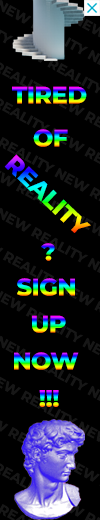
<style>
.page{position:relative;width:100px;height:520px;background:#000000}
.page>*{position:absolute;margin:0}
.t1{font:24px "MontserratRoman-ExtraBold";letter-spacing:-0.02em;text-transform:uppercase}
</style>
<div class="page">
<p class="t1" style="left:12px;top:86px;width:75px;height:18px">tired</p>
<p class="t1" style="left:33px;top:129px;width:35px;height:18px">of</p>
<p class="t1" style="left:4px;top:154px;width:87px;height:79px;rotate:44deg">reality</p>
<p class="t1" style="left:41px;top:243px;width:14px;height:18px">?</p>
<p class="t1" style="left:17px;top:278px;width:58px;height:18px">sign</p>
<p class="t1" style="left:32px;top:315px;width:34px;height:18px">up</p>
<p class="t1" style="left:14px;top:352px;width:65px;height:18px">now</p>
<p class="t1" style="left:39px;top:390px;width:20px;height:17px">!!!</p>
</div>
